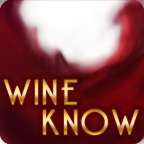
<style>
.page{position:relative;width:144px;height:144px}
.page>*{position:absolute;margin:0}
.t1{font:58.3px "BelleroseLight";letter-spacing:0.1em;font-weight:bold}
</style>
<div class="page">
<p class="t1" style="left:4px;top:79px;width:73px;height:27px">WINE</p>
<p class="t1" style="left:42px;top:109px;width:97px;height:27px">KNOW</p>
</div>
